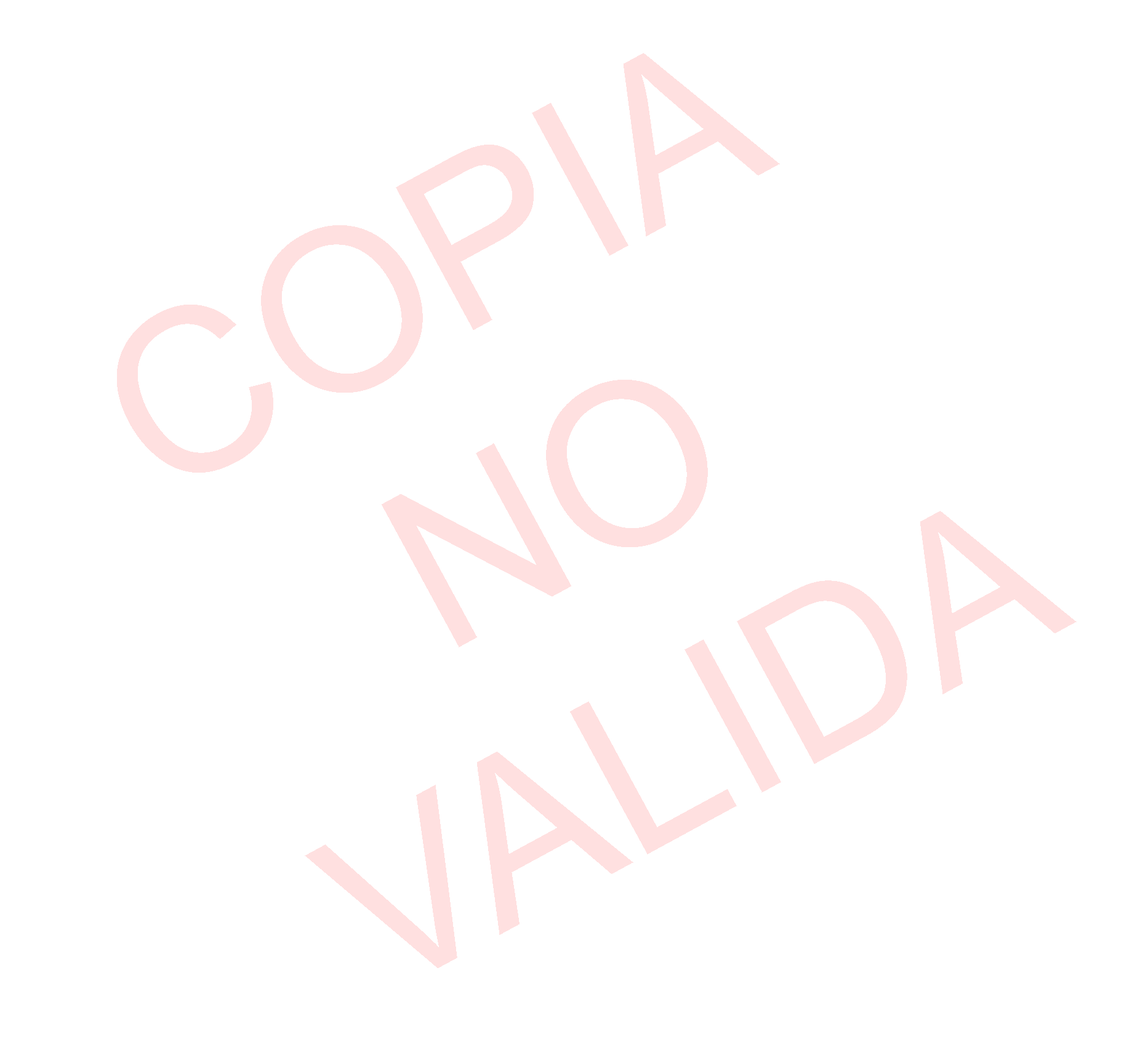
<style>
.page{position:relative;width:1124px;height:1061px;background:#ffffff}
.page>*{position:absolute;margin:0}
.t1{font:226.7px "ArialMT";color:#ffe0e0}
</style>
<div class="page">
<p class="t1" style="left:117px;top:53px;width:959px;height:915px;rotate:-29deg">COPIA NO VALIDA</p>
</div>
